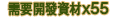
<style>
.page{position:relative;width:115px;height:18px;background:#ffffff}
.page>*{position:absolute;margin:0}
.t1{font:14px "GothicMB101Pr6N-Medium";color:#375309;font-weight:bold;scale:0.85 1}
</style>
<div class="page">
<p class="t1" style="left:8px;top:1px;width:101px;height:15px">需要開發資材x55</p>
</div>
